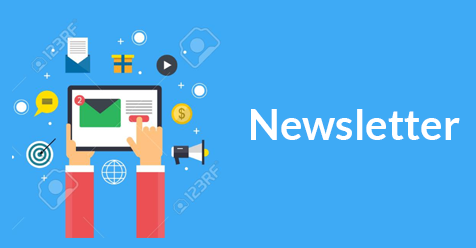
<style>
.page{position:relative;width:476px;height:248px;background:#3eaaf5}
.page>*{position:absolute;margin:0}
.t1{font:42px "Lato-Bold";color:#ffffff}
</style>
<div class="page">
<p class="t1" style="left:251px;top:109px;width:209px;height:31px">Newsletter</p>
</div>
